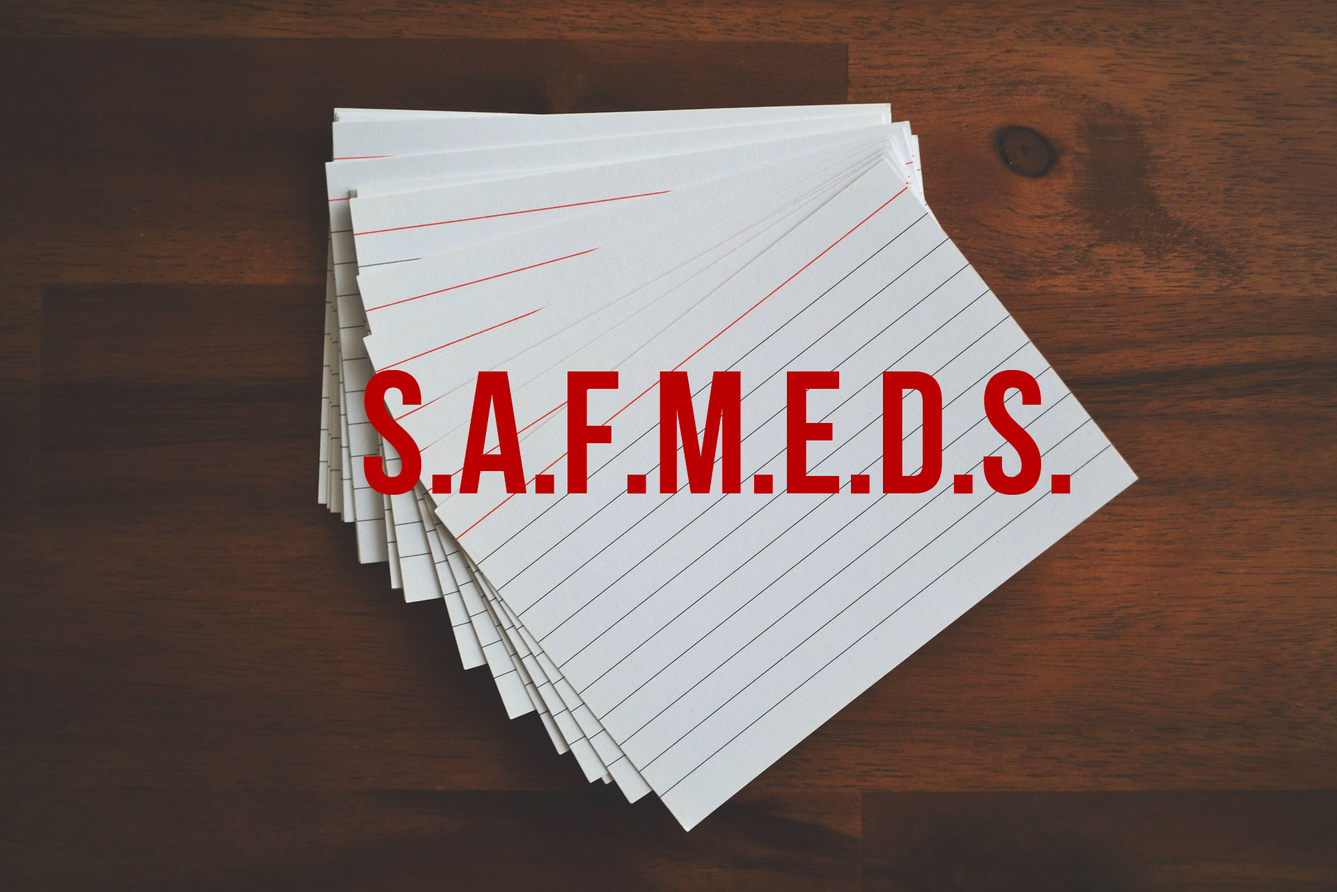
<style>
.page{position:relative;width:1337px;height:892px}
.page>*{position:absolute;margin:0}
.t1{font:174.1px "BebasNeueBold";color:#ba0000}
</style>
<div class="page">
<p class="t1" style="left:364px;top:370px;width:707px;height:125px">S.A.F.M.E.D.S.</p>
</div>
